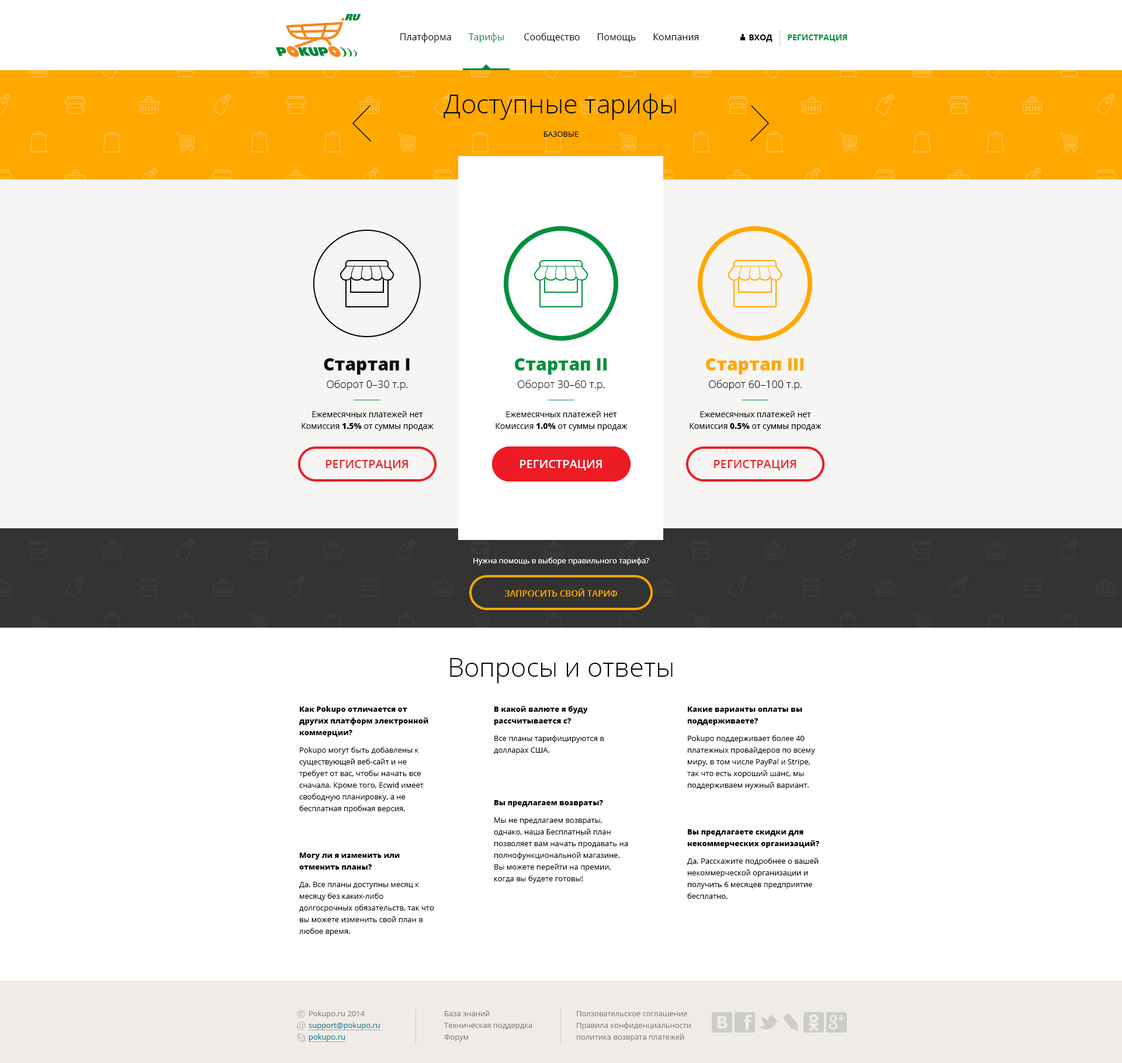
<style>
.page{position:relative;width:1122px;height:1063px;background:#ffffff}
.page>*{position:absolute;margin:0}
.t1{font:9.3px "OpenSans";color:#010101}
.t2{font:9.3px "OpenSans";color:#018f3c}
.t3{font:8.2px "OpenSans-Bold";color:#02903d;text-transform:uppercase}
.t4{font:8.2px "OpenSans-Bold";color:#000000;text-transform:uppercase}
.t5{font:26.3px/11.7px "OpenSans-Light";color:#000000}
.t6{font:7.6px/11.7px "OpenSans";color:#000000;text-transform:uppercase}
.t7{font:17.5px "OpenSans-Extrabold";color:#0e0e0e}
.t8{font:17.5px "OpenSans-Extrabold";color:#02903d}
.t9{font:17.5px "OpenSans-Extrabold";color:#ffa800}
.t10{font:10.5px "OpenSans-Light";color:#000000}
.t11{font:8.2px/11.7px "OpenSans";color:#000000}
.t12{font:8.2px/11.7px "OpenSans-Extrabold";color:#000000}
.t13{font:11.7px "OpenSans-Semibold";color:#ed1c24;text-transform:uppercase}
.t14{font:11.7px "OpenSans-Semibold";color:#ffffff;text-transform:uppercase}
.t15{font:7.6px "OpenSans";color:#ffffff}
.t16{font:8.8px "OpenSans-Semibold";color:#ffa800;text-transform:uppercase}
.t17{font:26.3px "OpenSans-Light";color:#000000}
.t18{font:7.6px/11.7px "OpenSans";color:#000000}
.t19{font:7.6px/11.7px "OpenSans-Extrabold";color:#000000}
.t20{font:7.6px/5.8px "OpenSans";color:#000000}
.t21{font:7.6px/5.8px "OpenSans-Extrabold";color:#000000}
.t22{font:7.6px/11.7px "OpenSans";color:#177a93}
.t23{font:7.6px/11.7px "OpenSans";color:#83827f}
</style>
<div class="page">
<p class="t1" style="left:400px;top:33px;width:299px;height:10px">Платформа       <span class="t2">Тарифы</span>        Сообщество       Помощь       Компания</p>
<p class="t3" style="left:749px;top:34px;width:98px;height:8px"><span class="t4">Вход       </span>регистрация</p>
<p class="t5" style="left:443px;top:93px;width:233px;height:44px;text-align:center">Доступные тарифы<br><br><span class="t6">Базовые</span></p>
<p class="t7" style="left:324px;top:358px;width:86px;height:17px">Стартап I</p>
<p class="t8" style="left:515px;top:358px;width:92px;height:17px">Стартап II</p>
<p class="t9" style="left:706px;top:358px;width:98px;height:17px">Стартап III</p>
<p class="t10" style="left:327px;top:380px;width:81px;height:10px">Оборот 0–30 т.р.</p>
<p class="t10" style="left:518px;top:380px;width:87px;height:10px">Оборот 30–60 т.р.</p>
<p class="t10" style="left:709px;top:380px;width:93px;height:10px">Оборот 60–100 т.р.</p>
<p class="t11" style="left:302px;top:411px;width:132px;height:20px;text-align:center">Ежемесячных платежей нет<br>Комиссия <span class="t12">1.5%</span> от суммы продаж</p>
<p class="t11" style="left:496px;top:411px;width:132px;height:20px;text-align:center">Ежемесячных платежей нет<br>Комиссия <span class="t12">1.0%</span> от суммы продаж</p>
<p class="t11" style="left:689px;top:411px;width:133px;height:20px;text-align:center">Ежемесячных платежей нет<br>Комиссия <span class="t12">0.5%</span> от суммы продаж</p>
<p class="t13" style="left:326px;top:460px;width:82px;height:10px">регистрация</p>
<p class="t14" style="left:520px;top:460px;width:82px;height:10px">регистрация</p>
<p class="t14" style="left:520px;top:460px;width:82px;height:10px">регистрация</p>
<p class="t13" style="left:714px;top:460px;width:82px;height:10px">регистрация</p>
<p class="t15" style="left:473px;top:557px;width:176px;height:8px">Нужна помощь в выборе правильного тарифа?</p>
<p class="t16" style="left:504px;top:588px;width:114px;height:9px">Запросить свой тариф</p>
<p class="t17" style="left:450px;top:658px;width:223px;height:25px">Вопросы и ответы</p>
<p class="t18" style="left:299px;top:706px;width:135px;height:229px"><span class="t19">Как Pokupo отличается от других платформ электронной коммерции?<br></span><span class="t20"><br>Pokupo</span> могут быть добавлены к существующей веб-сайт и не требует от вас, чтобы начать все сначала. Кроме того, Ecwid имеет свободную планировку, а не бесплатная пробная версия.<br><br><br><br><span class="t19">Могу ли я изменить или отменить планы?<br></span><span class="t20"><br>Д</span>а. Все планы доступны месяц к месяцу без каких-либо долгосрочных обязательств, так что вы можете изменить свой план в любое время.</p>
<p class="t18" style="left:494px;top:706px;width:134px;height:177px"><span class="t19">В какой валюте я буду рассчитывается с?<br></span><span class="t20"><br>В</span>се планы тарифицируются в долларах США.<br><br><br><br><br><span class="t21">Вы предлагаем возвраты?<br></span><span class="t20"><br>М</span>ы не предлагаем возвраты, однако, наша Бесплатный план позволяет вам начать продавать на полнофункциональной магазине. Вы можете перейти на премии, когда вы будете готовы!</p>
<p class="t18" style="left:687px;top:706px;width:132px;height:193px"><span class="t19">Какие варианты оплаты вы поддерживаете?<br></span><span class="t20"><br>Pokupo</span> поддерживает более 40 платежных провайдеров по всему миру, в том числе PayPal и Stripe, так что есть хороший шанс, мы поддерживаем нужный вариант.<br><br><br><br><span class="t19">Вы предлагаете скидки для некоммерческих организаций?<br></span><span class="t20"><br>Да</span>. Расскажите подробнее о вашей некоммерческой организации и получить 6 месяцев предприятие бесплатно.</p>
<p class="t22" style="left:309px;top:1010px;width:71px;height:31px"><span class="t23"><br>Pokupo.ru 2014<br></span>support@pokupo.ru<br>pokupo.ru</p>
<p class="t23" style="left:444px;top:1010px;width:88px;height:31px">База знаний<br>Техническая поддердка<br>Форум</p>
<p class="t23" style="left:577px;top:1011px;width:114px;height:30px">Ползовательское соглашение<br>Правила конфиденциальности<br>политика возврата платежей</p>
</div>
